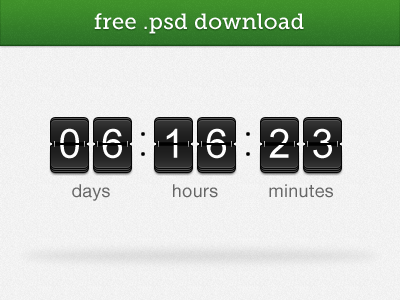
<style>
.page{position:relative;width:400px;height:300px}
.page>*{position:absolute;margin:0}
.t1{font:40px "ArialMT";letter-spacing:0.015em;color:#ffffff}
.t2{font:18px "HelveticaNeue";letter-spacing:0.015em;color:#666666}
</style>
<div class="page">
<p class="t1" style="left:60px;top:128px;width:19px;height:31px">0</p>
<p class="t1" style="left:102px;top:128px;width:20px;height:31px">6</p>
<p class="t1" style="left:166px;top:128px;width:12px;height:30px">1</p>
<p class="t1" style="left:206px;top:128px;width:20px;height:31px">6</p>
<p class="t1" style="left:269px;top:128px;width:20px;height:30px">2</p>
<p class="t1" style="left:313px;top:128px;width:19px;height:31px">3</p>
<p class="t2" style="left:72px;top:184px;width:38px;height:17px">days</p>
<p class="t2" style="left:173px;top:184px;width:45px;height:14px">hours</p>
<p class="t2" style="left:269px;top:184px;width:64px;height:14px">minutes</p>
</div>
